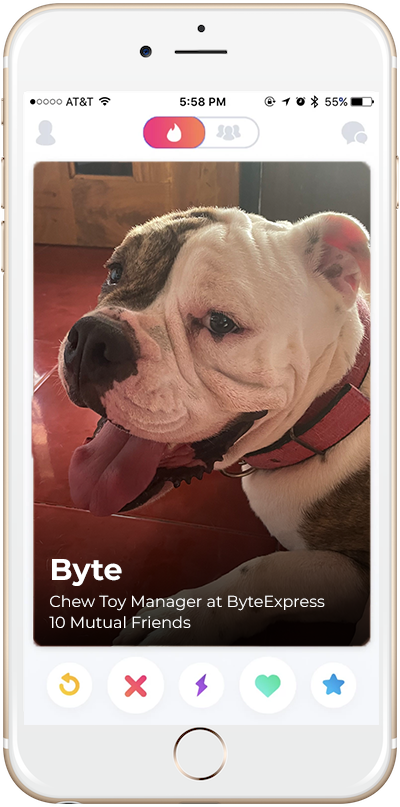
<style>
.page{position:relative;width:400px;height:807px}
.page>*{position:absolute;margin:0}
.t1{font:30px "MontserratRoman-Bold";color:#ffffff}
.t2{font:16px "MontserratRoman-Regular";color:#ffffff}
</style>
<div class="page">
<p class="t1" style="left:52px;top:559px;width:70px;height:27px">Byte</p>
<p class="t2" style="left:50px;top:595px;width:275px;height:16px">Chew Toy Manager at ByteExpress</p>
<p class="t2" style="left:49px;top:616px;width:142px;height:12px">10 Mutual Friends</p>
</div>
